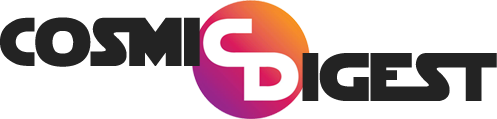
<style>
.page{position:relative;width:497px;height:119px;background:#ffffff}
.page>*{position:absolute;margin:0}
.t1{font:67.9px "StarJediSpecialEdition";color:#232323}
</style>
<div class="page">
<p class="t1" style="left:0px;top:17px;width:200px;height:50px">Cosmi</p>
<p class="t1" style="left:302px;top:53px;width:195px;height:48px">igest</p>
</div>
